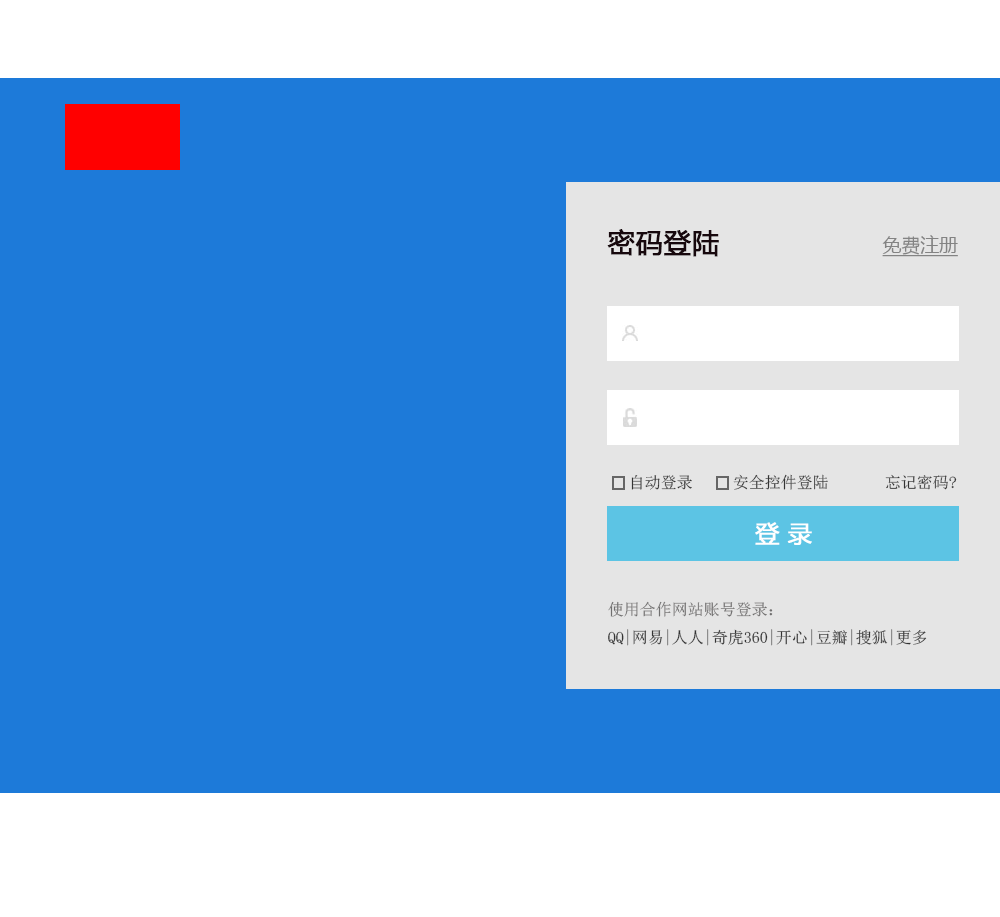
<style>
.page{position:relative;width:1000px;height:917px;background:#1d7ad9}
.page>*{position:absolute;margin:0}
.t1{font:27.3px "MicrosoftYaHei";color:#17080d;font-weight:bold}
.t2{font:18.8px "MicrosoftYaHei";color:#838383;text-decoration:underline}
.t3{font:16.1px "SimSun";color:#343434}
.t4{font:24.1px "MicrosoftYaHei";color:#ffffff;font-weight:bold}
.t5{font:16.1px "SimSun";color:#706f6f}
</style>
<div class="page">
<p class="t1" style="left:607px;top:229px;width:112px;height:28px">密码登陆</p>
<p class="t2" style="left:882px;top:235px;width:76px;height:22px">免费注册</p>
<p class="t3" style="left:631px;top:474px;width:326px;height:16px">自动登录     安全控件登陆       忘记密码?</p>
<p class="t4" style="left:755px;top:522px;width:57px;height:23px">登 录</p>
<p class="t3" style="left:608px;top:601px;width:319px;height:45px"><span class="t5">使用合作网站账号登录：<br></span>QQ|网易|人人|奇虎360|开心|豆瓣|搜狐|更多</p>
</div>
